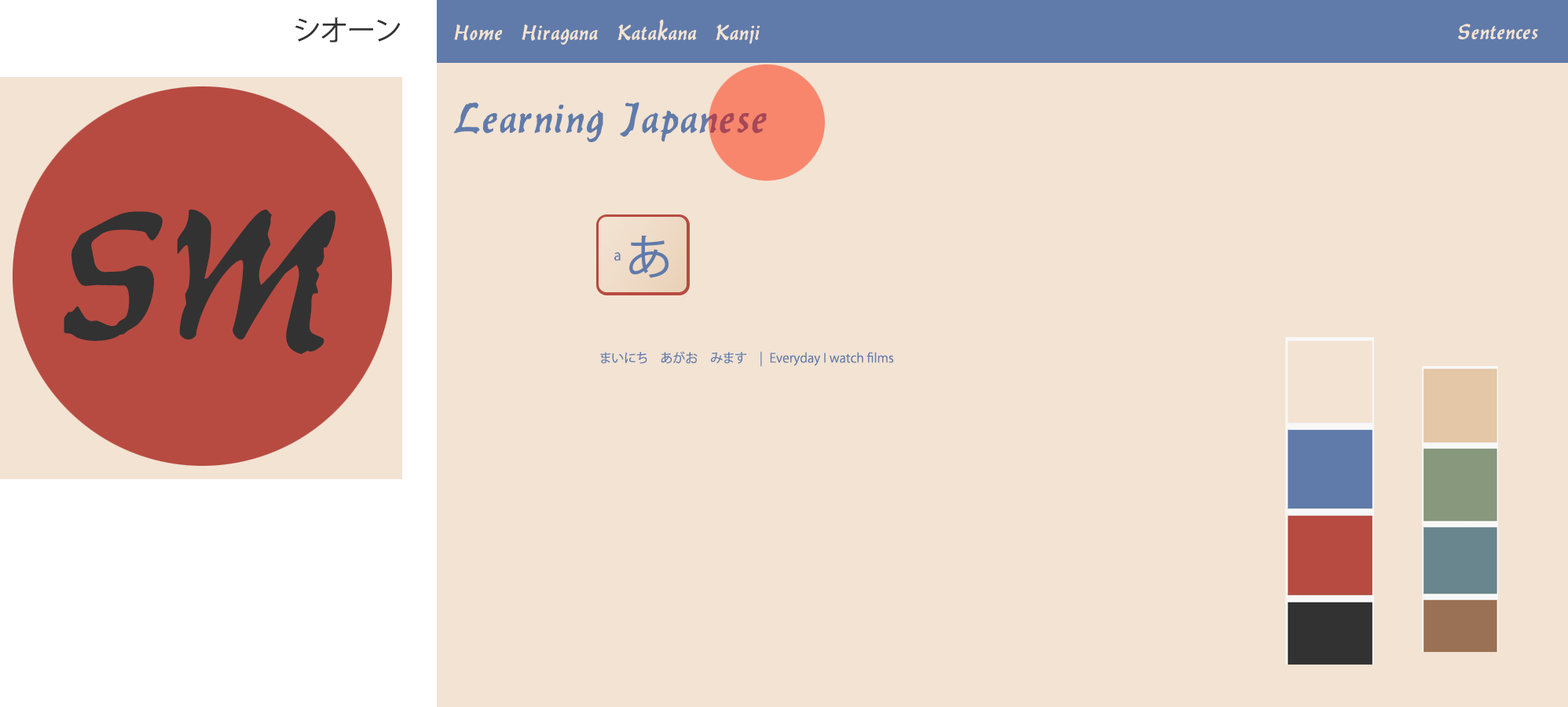
<style>
.page{position:relative;width:1568px;height:707px;background:#f3e3d3}
.page>*{position:absolute;margin:0}
.t1{font:28.3px "KozGoPr6N-Regular";color:#323232}
.t2{font:23.6px "Balthazar";color:#f3e3d3}
.t3{font:47.1px "Balthazar";color:#607baa}
.t4{font:199.5px "Balthazar";color:#323232}
.t5{font:47.1px "KozGoPr6N-Regular";color:#607baa}
.t6{font:14.1px "KozGoPr6N-Regular";color:#607baa}
.t7{font:12.6px "KozGoPr6N-Regular";color:#607baa}
</style>
<div class="page">
<p class="t1" style="left:295px;top:17px;width:106px;height:25px">シオーン</p>
<p class="t2" style="left:454px;top:24px;width:49px;height:17px">Home</p>
<p class="t2" style="left:522px;top:24px;width:76px;height:21px">Hiragana</p>
<p class="t2" style="left:617px;top:19px;width:80px;height:22px">Katakana</p>
<p class="t2" style="left:716px;top:24px;width:44px;height:20px">Kanji</p>
<p class="t2" style="left:1458px;top:24px;width:80px;height:16px">Sentences</p>
<p class="t3" style="left:453px;top:102px;width:314px;height:40px">Learning Japanese</p>
<p class="t4" style="left:64px;top:209px;width:271px;height:145px">SM</p>
<p class="t5" style="left:629px;top:235px;width:40px;height:43px">あ</p>
<p class="t6" style="left:614px;top:252px;width:7px;height:9px">a</p>
<p class="t7" style="left:600px;top:351px;width:294px;height:16px">まいにち　あがお　みます　| Everyday I watch films</p>
</div>
